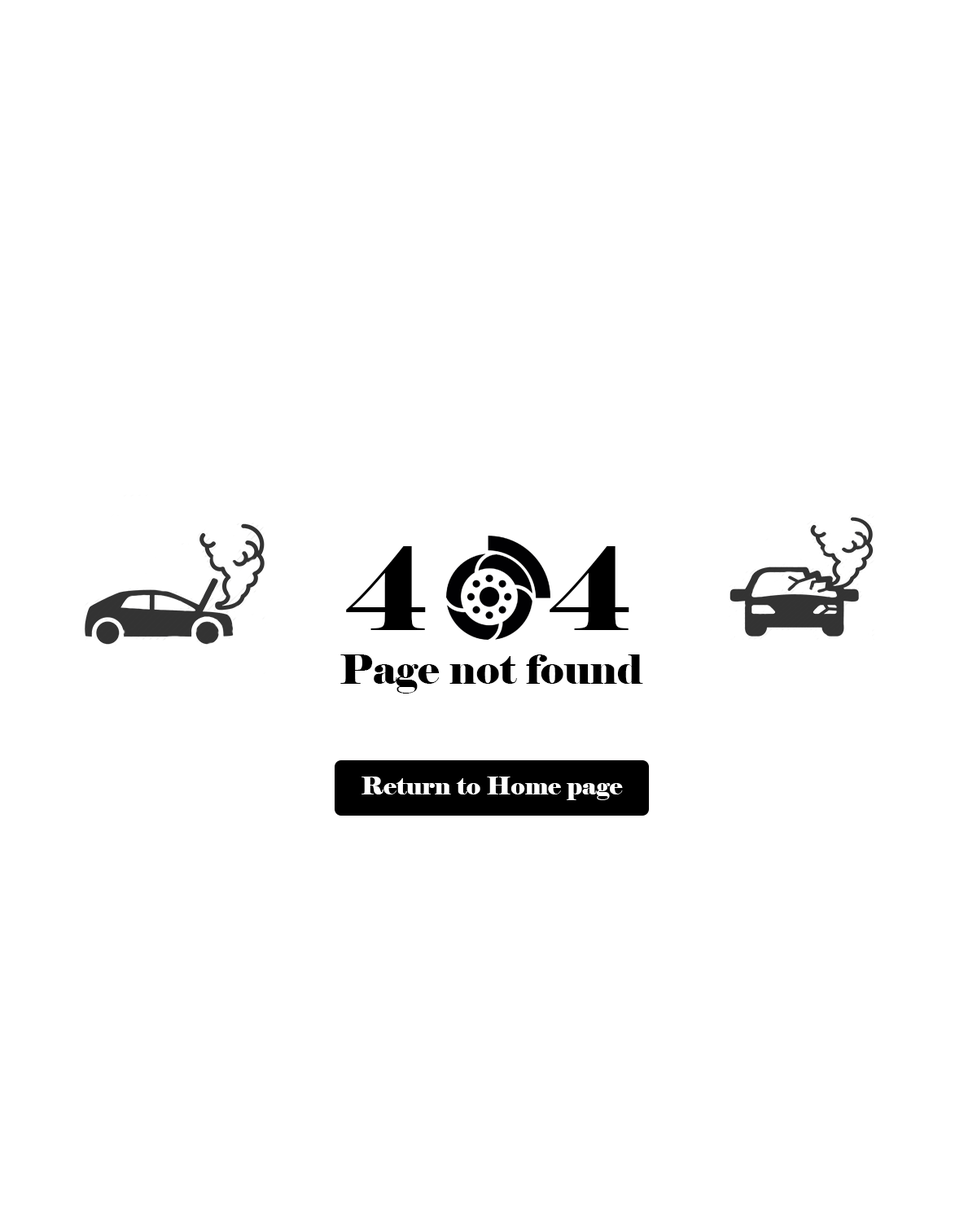
<style>
.page{position:relative;width:977px;height:1221px;background:#ffffff}
.page>*{position:absolute;margin:0}
.t1{font:113.9px "Elephant-Regular";color:#000000}
.t2{font:40.7px "Elephant-Regular";color:#000000}
.t3{font:24.4px "Elephant-Regular";color:#ffffff}
</style>
<div class="page">
<p class="t1" style="left:346px;top:546px;width:80px;height:84px">4</p>
<p class="t1" style="left:549px;top:546px;width:80px;height:84px">4</p>
<p class="t2" style="left:340px;top:654px;width:303px;height:39px">Page not found</p>
<p class="t3" style="left:361px;top:776px;width:262px;height:24px">Return to Home page</p>
</div>
